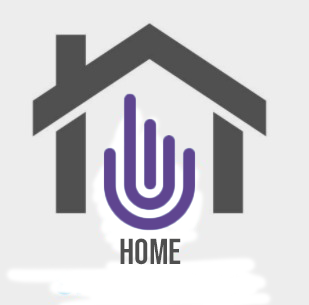
<style>
.page{position:relative;width:309px;height:305px;background:#ededed}
.page>*{position:absolute;margin:0}
.t1{font:36px "BebasNeue-Regular";color:#4f4f4f}
</style>
<div class="page">
<p class="t1" style="left:120px;top:238px;width:61px;height:27px">HOME</p>
</div>
